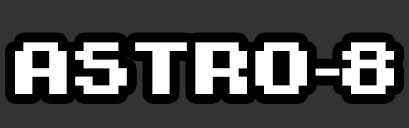
<style>
.page{position:relative;width:409px;height:128px;background:#333333}
.page>*{position:absolute;margin:0}
.t1{font:68.7px "6x6-Pixel-Font";color:#ffffff}
.t2{font:68.7px "BrickShapers";color:#ffffff}
</style>
<div class="page">
<p class="t1" style="left:15px;top:42px;width:379px;height:52px">ASTRO<span class="t2">-</span>8</p>
</div>
